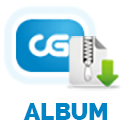
<style>
.page{position:relative;width:128px;height:128px;background:#ffffff}
.page>*{position:absolute;margin:0}
.t1{font:24.1px "Raleway-Heavy";color:#0084c4}
</style>
<div class="page">
<p class="t1" style="left:23px;top:103px;width:84px;height:17px">ALBUM</p>
</div>
